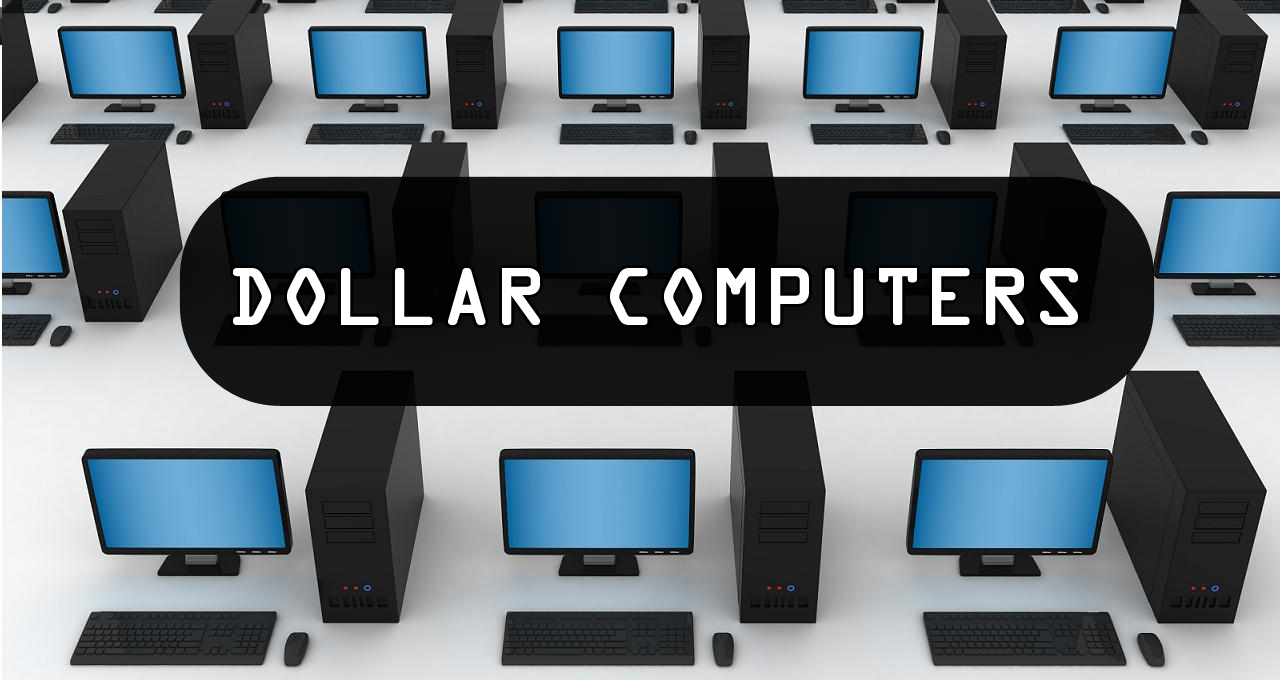
<style>
.page{position:relative;width:1280px;height:680px}
.page>*{position:absolute;margin:0}
.t1{font:72px "OCRAStd";color:#ffffff;font-weight:bold}
</style>
<div class="page">
<p class="t1" style="left:233px;top:268px;width:845px;height:57px">DOLLAR COMPUTERS</p>
</div>
